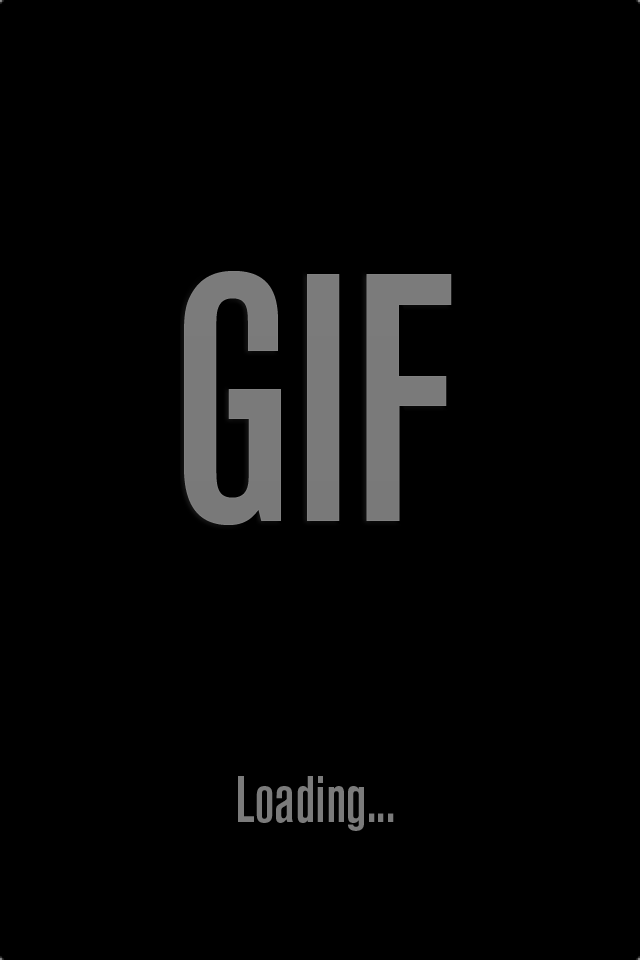
<style>
.page{position:relative;width:640px;height:960px;background:#000000}
.page>*{position:absolute;margin:0}
.t1{font:350px "AkzidenzGroteskBE-MdCn";color:#7a7a7a}
.t2{font:65px "AkzidenzGroteskBE-MdCn";color:#7b7b7b}
</style>
<div class="page">
<p class="t1" style="left:184px;top:271px;width:268px;height:254px">GIF</p>
<p class="t2" style="left:238px;top:776px;width:156px;height:55px">Loading...</p>
</div>
